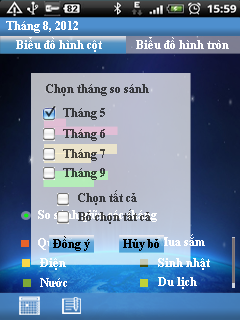
<style>
.page{position:relative;width:240px;height:320px}
.page>*{position:absolute;margin:0}
.t1{font:11.6px "TimesNewRomanPS-BoldMT";color:#ffffff}
.t2{font:11.6px "TimesNewRomanPS-BoldMT";color:#37383c}
.t3{font:11.6px "TimesNewRomanPS-BoldMT";color:#43393f}
.t4{font:11.6px "TimesNewRomanPS-BoldMT";color:#46443c}
.t5{font:11.6px "TimesNewRomanPS-BoldMT";color:#364637}
.t6{font:11.6px "TimesNewRomanPS-BoldMT";color:#37383d}
.t7{font:11.6px "TimesNewRomanPS-BoldMT";color:#383a3f}
.t8{font:11.6px "TimesNewRomanPS-BoldMT";color:#000000}
</style>
<div class="page">
<p class="t1" style="left:6px;top:21px;width:72px;height:12px">Tháng 8, 2012</p>
<p class="t1" style="left:16px;top:37px;width:86px;height:15px">Biểu đồ hình cột</p>
<p class="t1" style="left:136px;top:37px;width:93px;height:12px">Biểu đồ hình tròn</p>
<p class="t2" style="left:46px;top:84px;width:103px;height:12px">Chọn tháng so sánh</p>
<p class="t2" style="left:63px;top:108px;width:42px;height:12px">Tháng 5</p>
<p class="t3" style="left:63px;top:129px;width:42px;height:12px">Tháng 6</p>
<p class="t4" style="left:63px;top:149px;width:42px;height:12px">Tháng 7</p>
<p class="t5" style="left:63px;top:168px;width:42px;height:12px">Tháng 9</p>
<p class="t6" style="left:78px;top:190px;width:59px;height:15px">Chọn tất cả</p>
<p class="t7" style="left:78px;top:209px;width:73px;height:15px">Bỏ chọn tất cả</p>
<p class="t1" style="left:38px;top:210px;width:119px;height:12px">So sánh giữa các tháng</p>
<p class="t8" style="left:53px;top:236px;width:37px;height:15px">Đồng ý</p>
<p class="t8" style="left:123px;top:239px;width:36px;height:12px">Hủy bỏ</p>
<p class="t1" style="left:157px;top:234px;width:48px;height:12px">Mua sắm</p>
<p class="t1" style="left:40px;top:258px;width:26px;height:12px">Điện</p>
<p class="t1" style="left:158px;top:258px;width:52px;height:12px">Sinh nhật</p>
<p class="t1" style="left:40px;top:278px;width:27px;height:9px">Nước</p>
<p class="t1" style="left:158px;top:277px;width:39px;height:12px">Du lịch</p>
</div>
